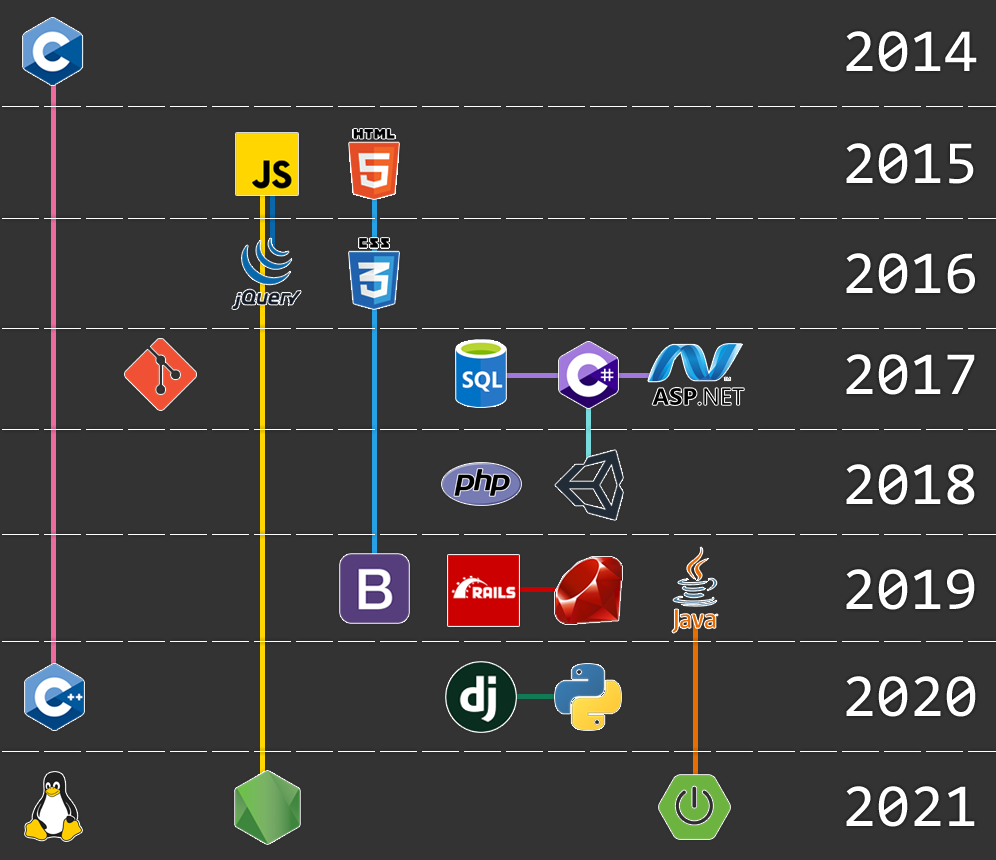
<style>
.page{position:relative;width:996px;height:860px;background:#333333}
.page>*{position:absolute;margin:0}
.t1{font:61.5px "Consolas";color:#ffffff}
</style>
<div class="page">
<p class="t1" style="left:846px;top:31px;width:131px;height:41px">2014</p>
<p class="t1" style="left:846px;top:143px;width:128px;height:41px">2015</p>
<p class="t1" style="left:846px;top:253px;width:129px;height:41px">2016</p>
<p class="t1" style="left:846px;top:354px;width:129px;height:41px">2017</p>
<p class="t1" style="left:846px;top:464px;width:129px;height:41px">2018</p>
<p class="t1" style="left:846px;top:569px;width:129px;height:41px">2019</p>
<p class="t1" style="left:846px;top:676px;width:130px;height:41px">2020</p>
<p class="t1" style="left:846px;top:786px;width:129px;height:41px">2021</p>
</div>
